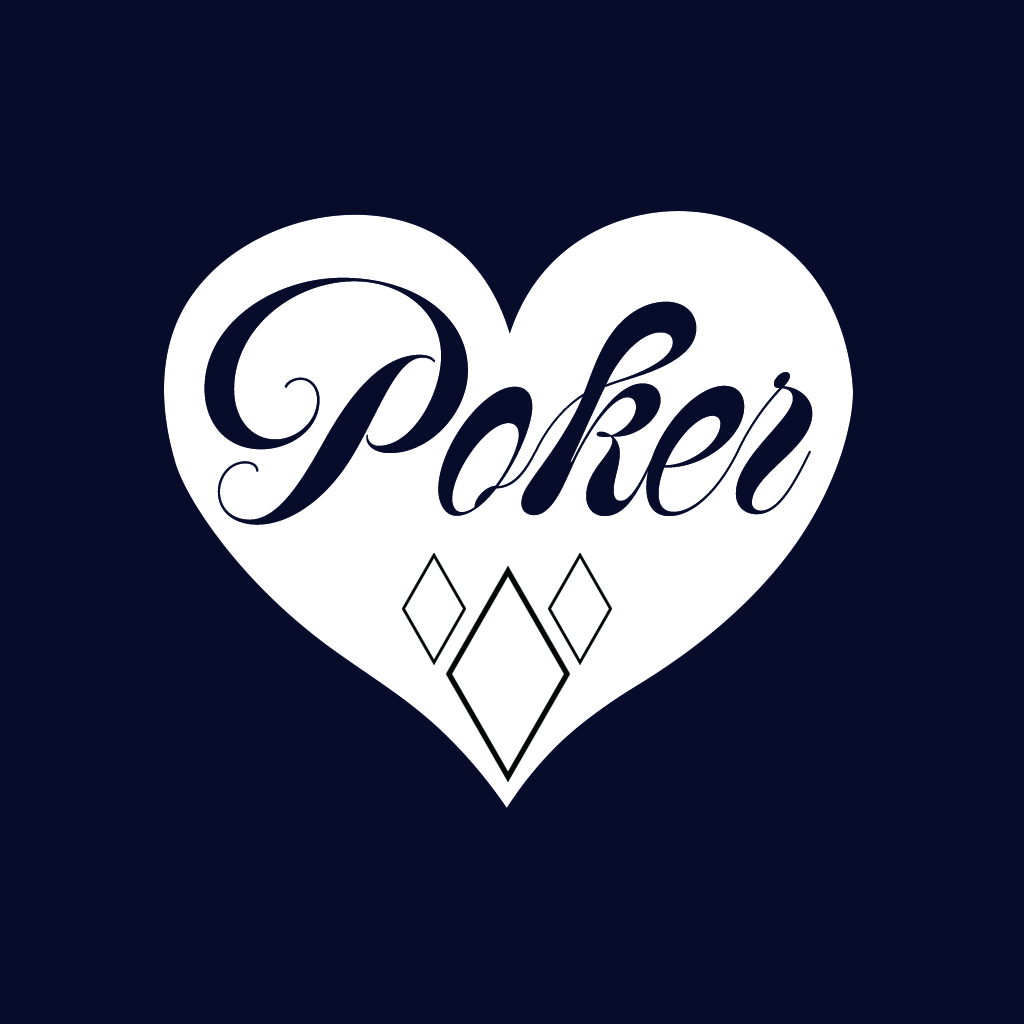
<style>
.page{position:relative;width:1024px;height:1024px;background:#070c2a}
.page>*{position:absolute;margin:0}
.t1{font:270.8px "DeseoMedium-Regular";color:#070c2a}
</style>
<div class="page">
<p class="t1" style="left:204px;top:277px;width:609px;height:248px">Poker</p>
</div>
